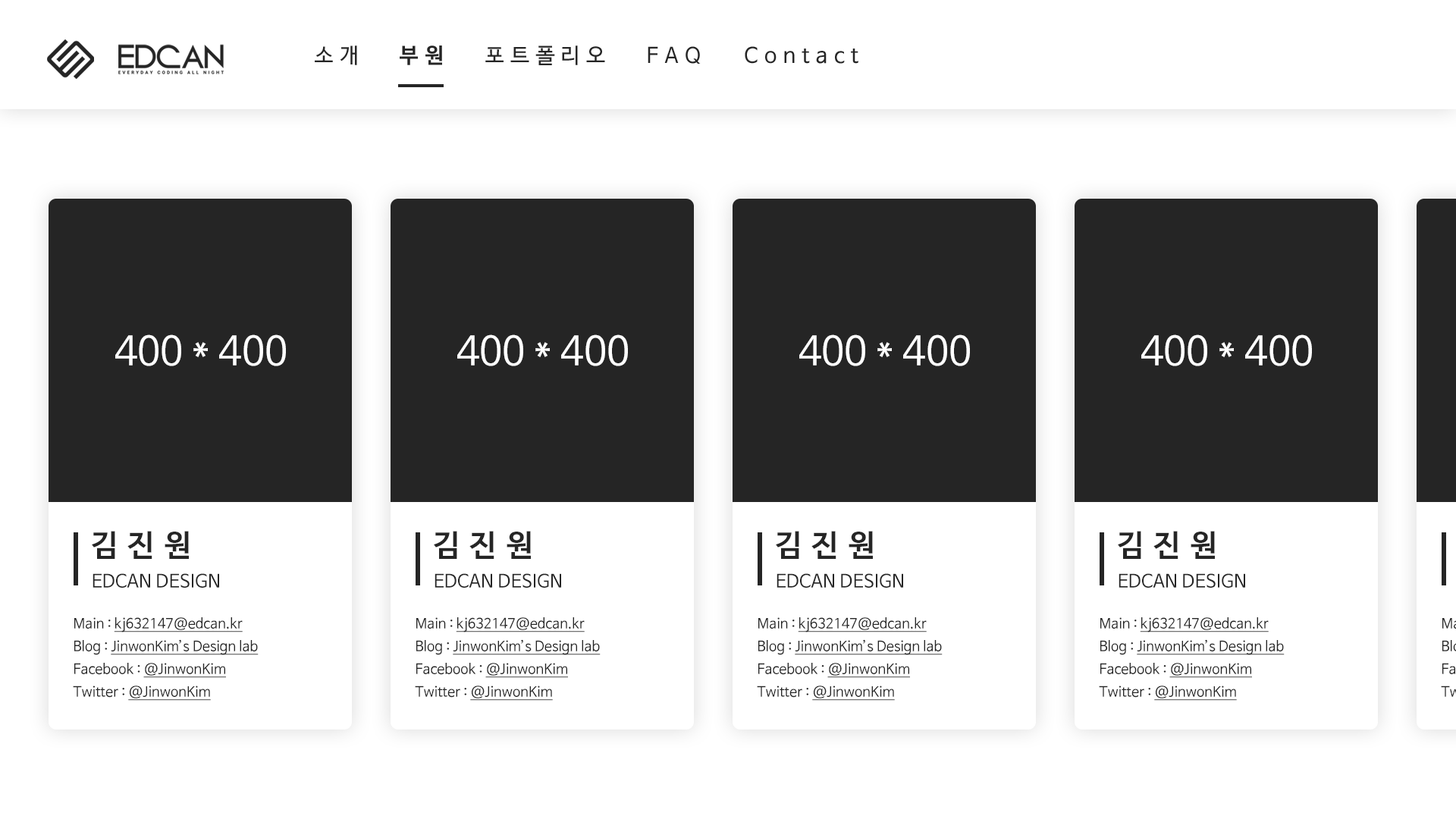
<style>
.page{position:relative;width:1456px;height:819px;background:#ffffff}
.page>*{position:absolute;margin:0}
.t1{font:21.2px "NanumBarunGothic";letter-spacing:0.3em;color:#252525}
.t2{font:21.2px "NanumBarunGothicBold";letter-spacing:0.3em;color:#252525}
.t3{font:39.4px "NanumBarunGothic";color:#ffffff}
.t4{font:30.3px "NanumBarunGothicBold";letter-spacing:0.3em;color:#252525}
.t5{font:18.2px "NanumBarunGothic";color:#252525}
.t6{font:13.6px/22.7px "NanumBarunGothic";color:#252525;text-decoration:underline}
.t7{font:13.6px/22.7px "NanumBarunGothic";color:#252525}
</style>
<div class="page">
<p class="t1" style="left:315px;top:45px;width:42px;height:20px">소개</p>
<p class="t2" style="left:400px;top:45px;width:42px;height:20px">부원</p>
<p class="t1" style="left:485px;top:45px;width:120px;height:20px">포트폴리오</p>
<p class="t1" style="left:648px;top:46px;width:53px;height:18px">FAQ</p>
<p class="t1" style="left:745px;top:46px;width:113px;height:18px">Contact</p>
<p class="t3" style="left:115px;top:334px;width:171px;height:32px">400 * 400</p>
<p class="t3" style="left:457px;top:334px;width:171px;height:32px">400 * 400</p>
<p class="t3" style="left:799px;top:334px;width:171px;height:32px">400 * 400</p>
<p class="t3" style="left:1141px;top:334px;width:171px;height:32px">400 * 400</p>
<p class="t4" style="left:92px;top:531px;width:97px;height:28px">김진원</p>
<p class="t4" style="left:434px;top:531px;width:97px;height:28px">김진원</p>
<p class="t4" style="left:776px;top:531px;width:97px;height:28px">김진원</p>
<p class="t4" style="left:1118px;top:531px;width:97px;height:28px">김진원</p>
<p class="t5" style="left:93px;top:573px;width:126px;height:15px">EDCAN DESIGN</p>
<p class="t5" style="left:435px;top:573px;width:126px;height:15px">EDCAN DESIGN</p>
<p class="t5" style="left:777px;top:573px;width:126px;height:15px">EDCAN DESIGN</p>
<p class="t5" style="left:1119px;top:573px;width:126px;height:15px">EDCAN DESIGN</p>
<p class="t6" style="left:73px;top:617px;width:186px;height:84px"><span class="t7">Main : </span>kj632147@edcan.kr<br><span class="t7">Blog : </span>JinwonKim’s Design lab<br><span class="t7">Facebook : </span>@JinwonKim<br><span class="t7">Twitter : </span>@JinwonKim</p>
<p class="t6" style="left:415px;top:617px;width:186px;height:84px"><span class="t7">Main : </span>kj632147@edcan.kr<br><span class="t7">Blog : </span>JinwonKim’s Design lab<br><span class="t7">Facebook : </span>@JinwonKim<br><span class="t7">Twitter : </span>@JinwonKim</p>
<p class="t6" style="left:757px;top:617px;width:186px;height:84px"><span class="t7">Main : </span>kj632147@edcan.kr<br><span class="t7">Blog : </span>JinwonKim’s Design lab<br><span class="t7">Facebook : </span>@JinwonKim<br><span class="t7">Twitter : </span>@JinwonKim</p>
<p class="t6" style="left:1099px;top:617px;width:186px;height:84px"><span class="t7">Main : </span>kj632147@edcan.kr<br><span class="t7">Blog : </span>JinwonKim’s Design lab<br><span class="t7">Facebook : </span>@JinwonKim<br><span class="t7">Twitter : </span>@JinwonKim</p>
</div>
